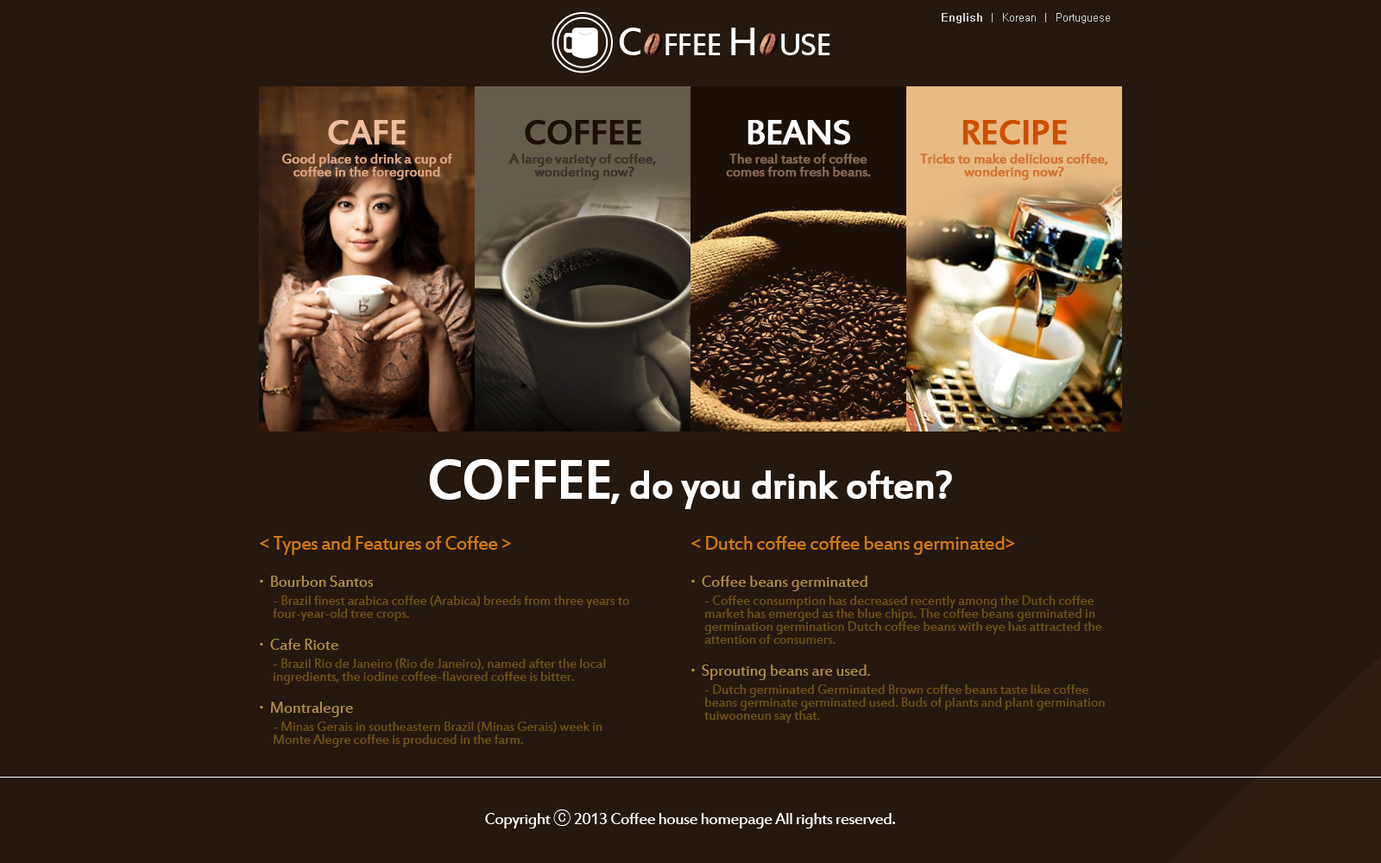
<style>
.page{position:relative;width:1381px;height:863px;background:#25180f}
.page>*{position:absolute;margin:0}
.t1{font:10.4px "Gulim";color:#cfcfcf}
.t2{font:10.4px "Gulim";color:#cfcfcf;font-weight:bold}
.t3{font:38.8px "EstrangeloEdessa";letter-spacing:-0.04em;color:#efbd9d;font-weight:bold}
.t4{font:38.8px "EstrangeloEdessa";letter-spacing:-0.04em;color:#1b1008;font-weight:bold}
.t5{font:38.8px "EstrangeloEdessa";letter-spacing:-0.04em;color:#ffffff;font-weight:bold}
.t6{font:38.8px "EstrangeloEdessa";letter-spacing:-0.04em;color:#ca5000;font-weight:bold}
.t7{font:15.5px/12.9px "EstrangeloEdessa";letter-spacing:-0.04em;color:#dba17d;font-weight:bold}
.t8{font:15.5px/12.9px "EstrangeloEdessa";letter-spacing:-0.04em;color:#39332b;font-weight:bold}
.t9{font:15.5px/12.9px "EstrangeloEdessa";letter-spacing:-0.04em;color:#856752;font-weight:bold}
.t10{font:15.5px/12.9px "EstrangeloEdessa";letter-spacing:-0.04em;color:#d37334;font-weight:bold}
.t11{font:43.2px "EstrangeloEdessa";letter-spacing:-0.04em;color:#ffffff;font-weight:bold}
.t12{font:60.4px "EstrangeloEdessa";letter-spacing:-0.04em;color:#ffffff;font-weight:bold}
.t13{font:21.6px "EstrangeloEdessa";letter-spacing:-0.04em;color:#d17912}
.t14{font:17.3px "EstrangeloEdessa";letter-spacing:-0.02em;color:#b18f47}
.t15{font:17.3px "Gulim";letter-spacing:-0.02em;color:#b18f47}
.t16{font:14.7px/12.9px "EstrangeloEdessa";letter-spacing:-0.02em;color:#6f5317}
.t17{font:18.1px "EstrangeloEdessa";letter-spacing:-0.04em;color:#ffffff}
.t18{font:18.1px "Gulim";letter-spacing:-0.04em;color:#ffffff}
</style>
<div class="page">
<p class="t1" style="left:942px;top:13px;width:168px;height:10px"><span class="t2">English</span>  |  Korean  |  Portuguese</p>
<p class="t3" style="left:328px;top:120px;width:78px;height:25px">CAFE</p>
<p class="t4" style="left:525px;top:120px;width:116px;height:25px">COFFEE</p>
<p class="t5" style="left:748px;top:120px;width:102px;height:25px">BEANS</p>
<p class="t6" style="left:963px;top:120px;width:104px;height:25px">RECIPE</p>
<p class="t7" style="left:281px;top:154px;width:171px;height:26px;text-align:center">Good place to drink a cup of<br>coffee in the foreground</p>
<p class="t8" style="left:509px;top:154px;width:147px;height:26px;text-align:center">A large variety of coffee, <br>wondering now?</p>
<p class="t9" style="left:726px;top:154px;width:145px;height:23px;text-align:center">The real taste of coffee<br>comes from fresh beans.</p>
<p class="t10" style="left:920px;top:154px;width:188px;height:26px;text-align:center">Tricks to make delicious coffee,<br>wondering now?</p>
<p class="t11" style="left:429px;top:459px;width:523px;height:50px"><span class="t12">COFFEE</span>, do you drink often?</p>
<p class="t13" style="left:260px;top:536px;width:251px;height:19px">&lt; Types and Features of Coffee &gt;</p>
<p class="t13" style="left:691px;top:536px;width:324px;height:19px">&lt; Dutch coffee coffee beans germinated&gt;</p>
<p class="t14" style="left:260px;top:576px;width:113px;height:11px"><span class="t15">ㆍ</span>Bourbon Santos</p>
<p class="t14" style="left:691px;top:576px;width:177px;height:15px"><span class="t15">ㆍ</span>Coffee beans germinated</p>
<p class="t16" style="left:273px;top:596px;width:356px;height:26px">- Brazil finest arabica coffee (Arabica) breeds from three years to <br>four-year-old tree crops.</p>
<p class="t16" style="left:704px;top:596px;width:398px;height:48px">- Coffee consumption has decreased recently among the Dutch coffee <br>market has emerged as the blue chips. The coffee beans germinated in <br>germination germination Dutch coffee beans with eye has attracted the <br>attention of consumers.</p>
<p class="t14" style="left:260px;top:639px;width:78px;height:11px"><span class="t15">ㆍ</span>Cafe Riote</p>
<p class="t16" style="left:274px;top:659px;width:332px;height:26px">- Brazil Rio de Janeiro (Rio de Janeiro), named after the local <br>ingredients, the iodine coffee-flavored coffee is bitter.</p>
<p class="t14" style="left:691px;top:665px;width:179px;height:15px"><span class="t15">ㆍ</span>Sprouting beans are used.</p>
<p class="t16" style="left:704px;top:685px;width:401px;height:38px">- Dutch germinated Germinated Brown coffee beans taste like coffee <br>beans germinate germinated used. Buds of plants and plant germination <br>tuiwooneun say that.</p>
<p class="t14" style="left:260px;top:702px;width:93px;height:15px"><span class="t15">ㆍ</span>Montralegre</p>
<p class="t16" style="left:274px;top:722px;width:329px;height:26px">- Minas Gerais in southeastern Brazil (Minas Gerais) week in <br>Monte Alegre coffee is produced in the farm.</p>
<p class="t17" style="left:485px;top:810px;width:410px;height:19px">Copyright <span class="t18">ⓒ</span> 2013 Coffee house homepage All rights reserved.</p>
</div>
